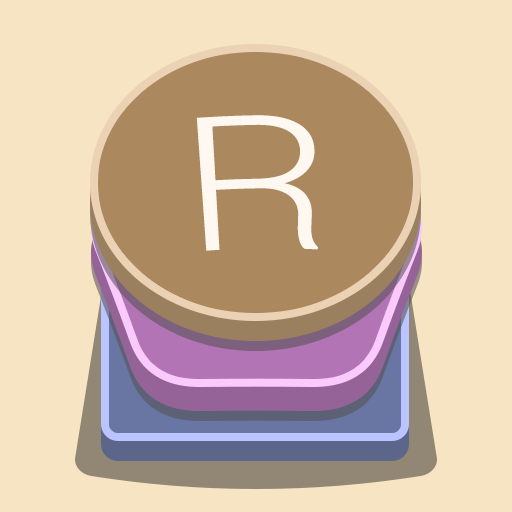
<style>
.page{position:relative;width:512px;height:512px;background:#f6e4c2}
.page>*{position:absolute;margin:0}
.t1{font:186.6px "Roboto-Light";color:#fff8f0}
</style>
<div class="page">
<p class="t1" style="left:196px;top:115px;width:122px;height:136px">R</p>
</div>
